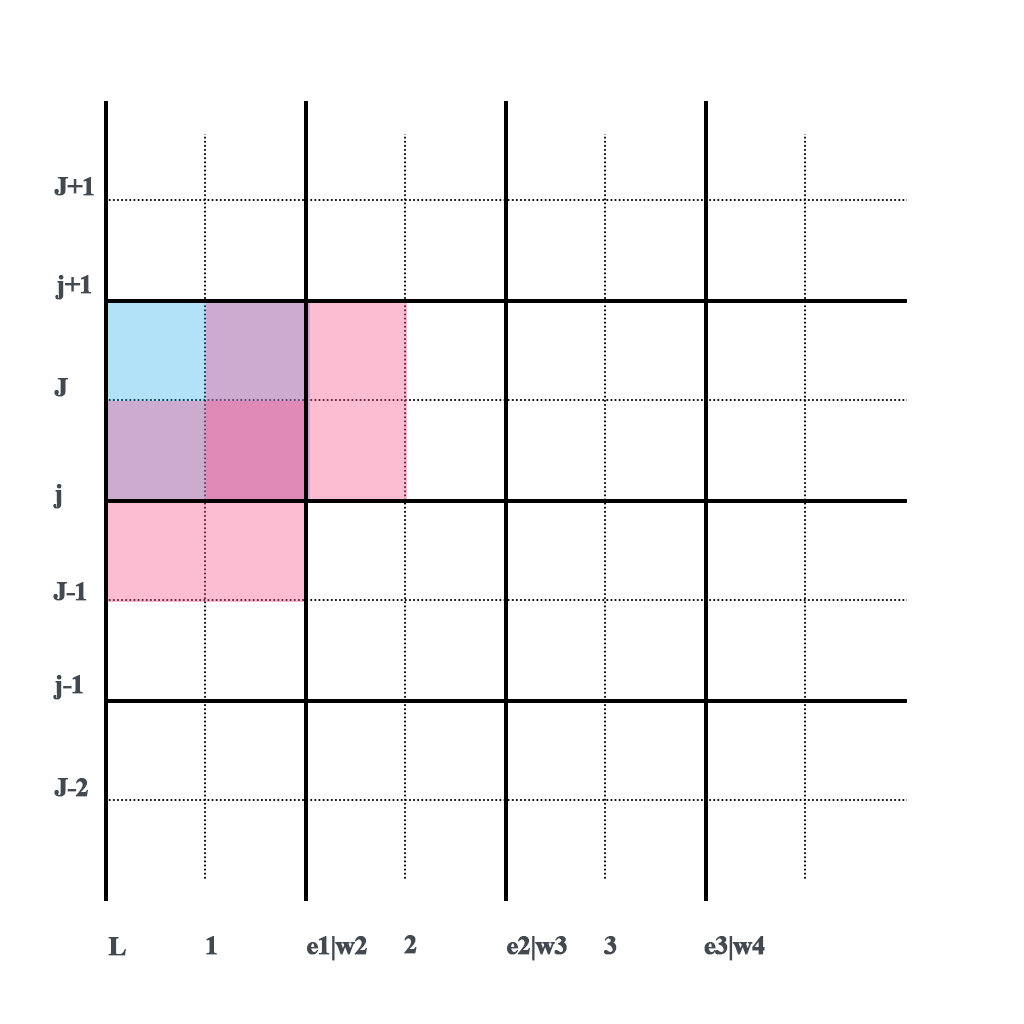
<style>
.page{position:relative;width:1024px;height:1024px;background:#ffffff}
.page>*{position:absolute;margin:0}
.t1{font:27px "TimesNewRomanPS-BoldMT";letter-spacing:-0.055em;color:#424951;font-weight:bold}
</style>
<div class="page">
<p class="t1" style="left:54px;top:177px;width:40px;height:19px">J+1</p>
<p class="t1" style="left:55px;top:275px;width:37px;height:25px">j+1</p>
<p class="t1" style="left:54px;top:378px;width:15px;height:19px">J</p>
<p class="t1" style="left:53px;top:484px;width:9px;height:25px">j</p>
<p class="t1" style="left:53px;top:582px;width:34px;height:19px">J-1</p>
<p class="t1" style="left:53px;top:675px;width:30px;height:25px">j-1</p>
<p class="t1" style="left:54px;top:778px;width:34px;height:19px">J-2</p>
<p class="t1" style="left:108px;top:937px;width:18px;height:19px">L</p>
<p class="t1" style="left:206px;top:936px;width:11px;height:19px">1</p>
<p class="t1" style="left:307px;top:936px;width:60px;height:25px">e1|w2</p>
<p class="t1" style="left:404px;top:935px;width:13px;height:19px">2</p>
<p class="t1" style="left:507px;top:936px;width:60px;height:25px">e2|w3</p>
<p class="t1" style="left:604px;top:936px;width:13px;height:19px">3</p>
<p class="t1" style="left:704px;top:936px;width:61px;height:25px">e3|w4</p>
</div>
